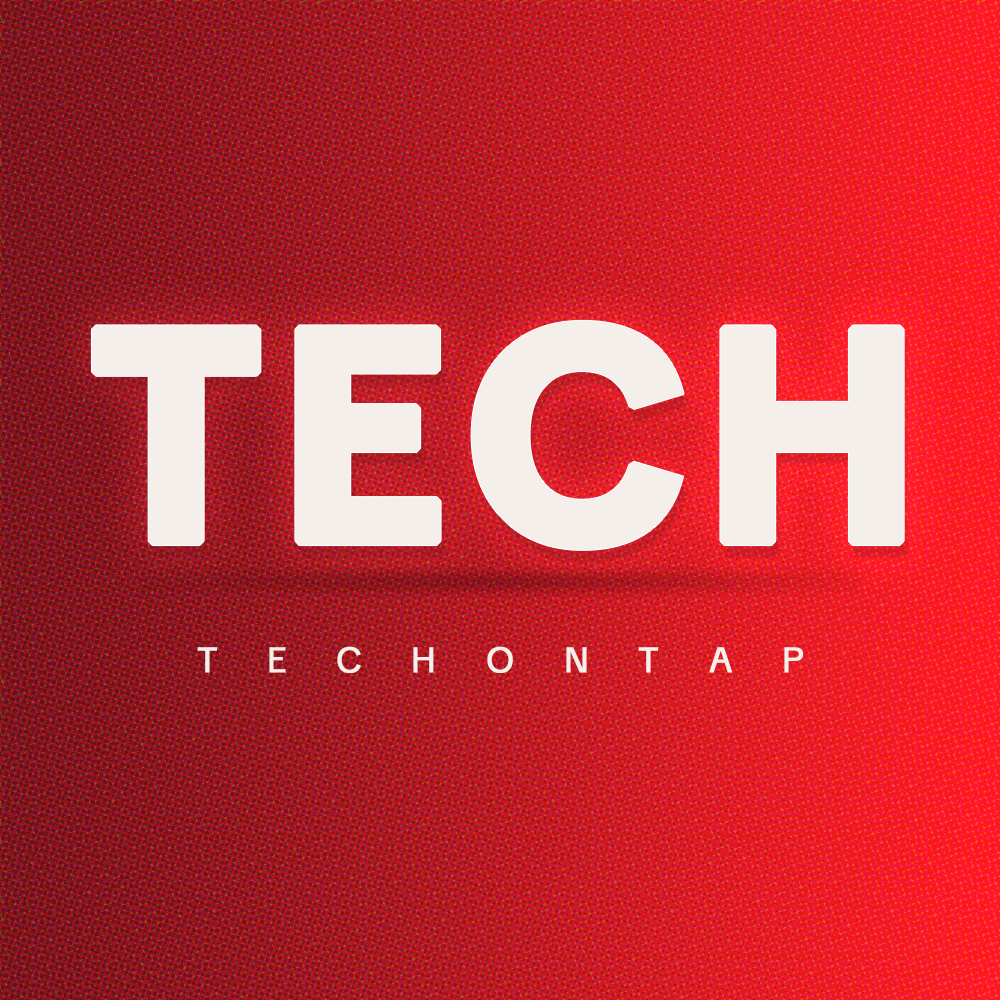
<style>
.page{position:relative;width:1000px;height:1000px}
.page>*{position:absolute;margin:0}
.t1{font:300px "TikTokDisplay-Bold";letter-spacing:0.04em;color:#f4efea;text-transform:uppercase;font-weight:bold}
.t2{font:35px "TikTokDisplay-Regular";letter-spacing:1.42em;color:#f4efea;text-transform:uppercase;font-weight:bold}
</style>
<div class="page">
<p class="t1" style="left:91px;top:320px;width:813px;height:230px">tech</p>
<p class="t2" style="left:197px;top:646px;width:606px;height:27px">techontap</p>
</div>
